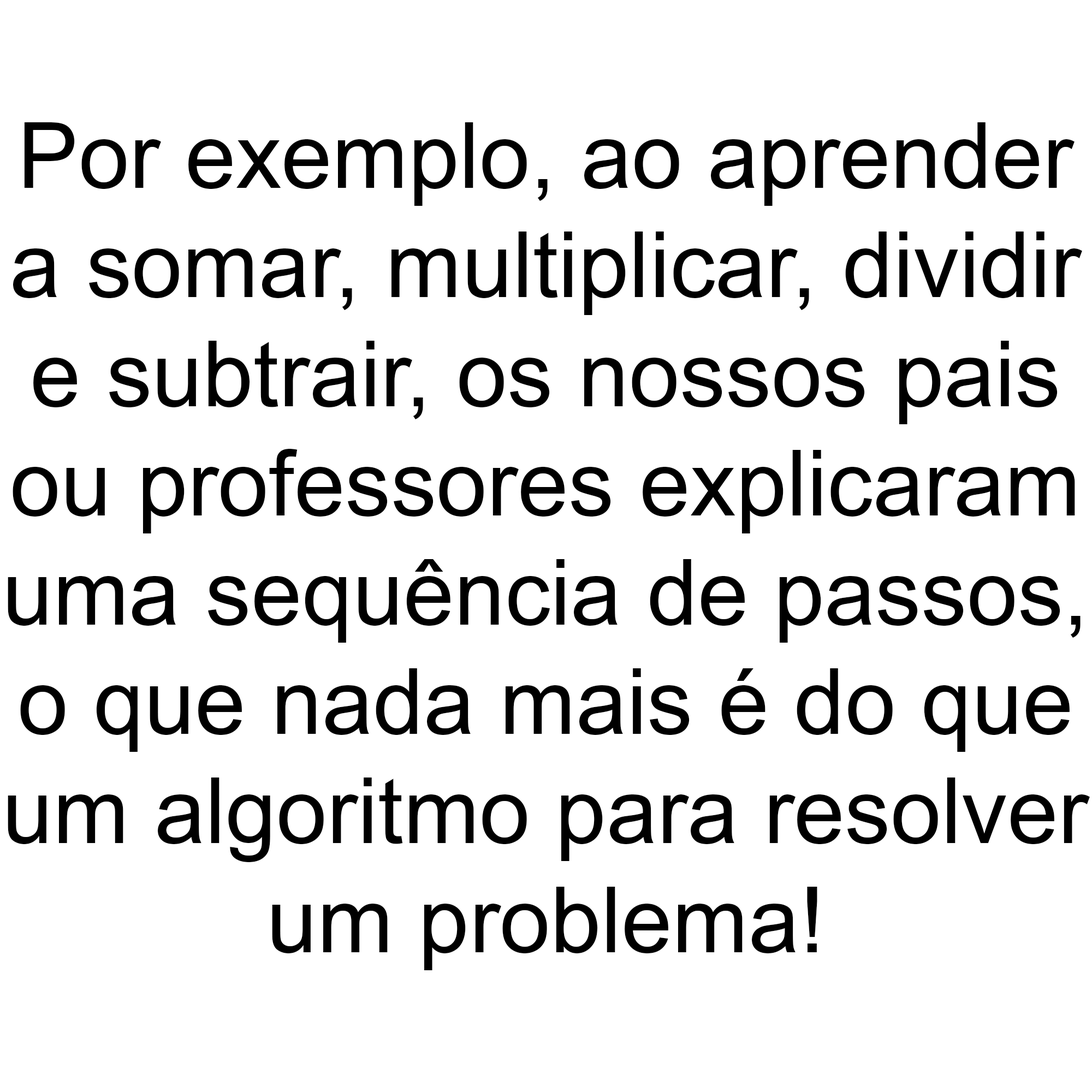
<style>
.page{position:relative;width:1092px;height:1092px;background:#ffffff}
.page>*{position:absolute;margin:0}
.t1{font:91px "ArialMT";color:#000000}
</style>
<div class="page">
<p class="t1" style="left:8px;top:122px;width:1082px;height:848px;text-align:center">Por exemplo, ao aprender<br>a somar, multiplicar, dividir<br>e subtrair, os nossos pais<br>ou professores explicaram<br>uma sequência de passos,<br>o que nada mais é do que<br>um algoritmo para resolver<br>um problema!</p>
</div>
